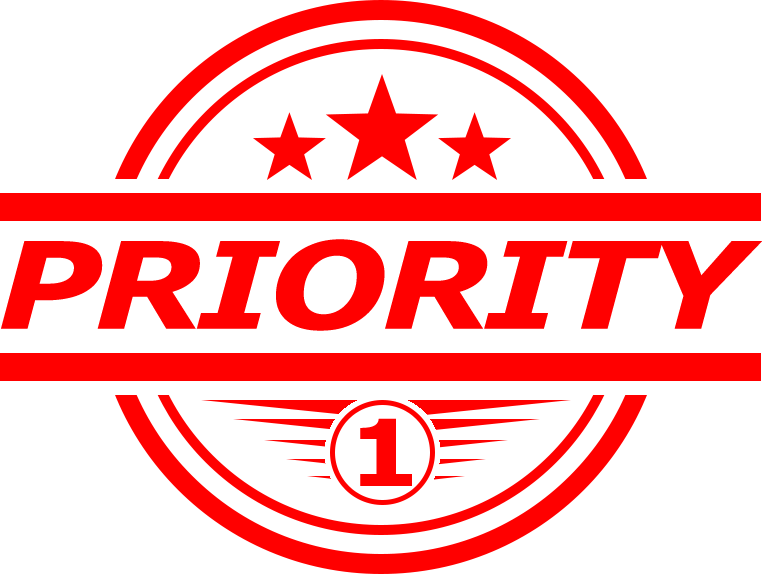
<style>
.page{position:relative;width:762px;height:574px;background:#ffffff}
.page>*{position:absolute;margin:0}
.t1{font:120.4px "Verdana-BoldItalic";letter-spacing:-0.04em;color:#ff0000;scale:1.16 1}
.t2{font:91.8px "Verdana-Bold";letter-spacing:-0.04em;color:#ff0000;scale:1.16 1}
</style>
<div class="page">
<p class="t1" style="left:1px;top:239px;width:761px;height:92px">PRIORITY</p>
<p class="t2" style="left:360px;top:418px;width:52px;height:68px">1</p>
</div>
